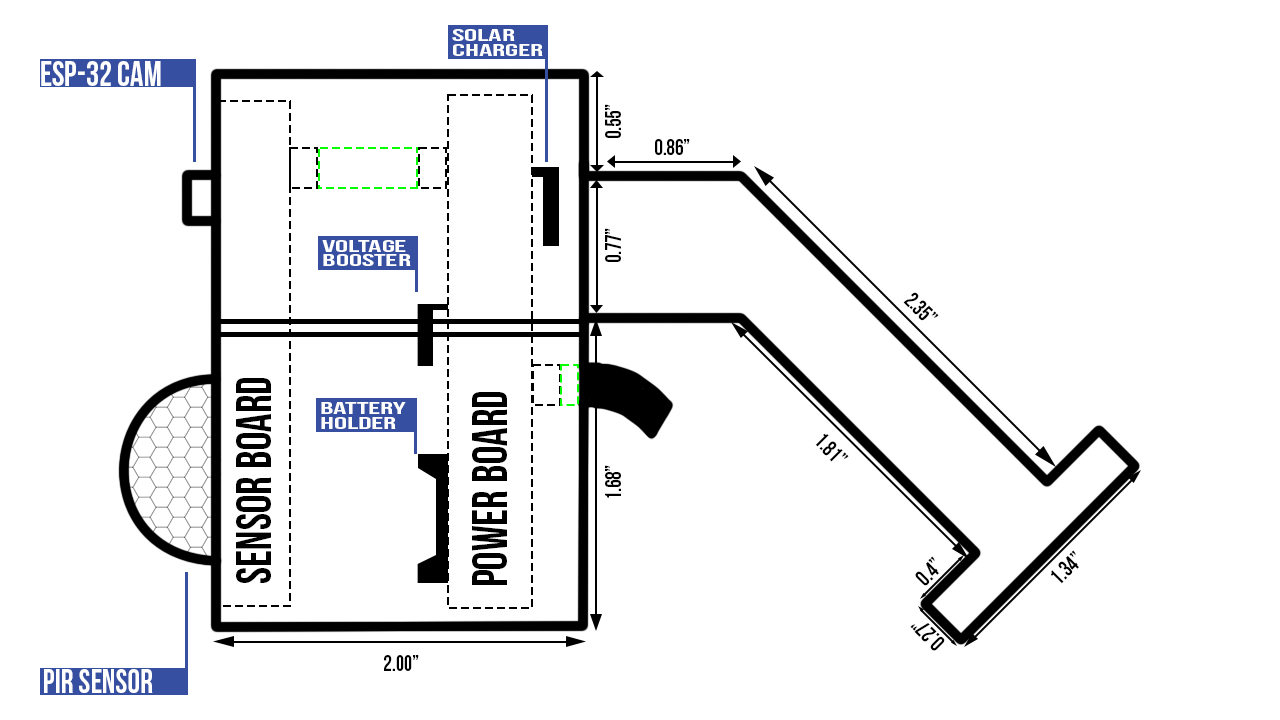
<style>
.page{position:relative;width:1280px;height:720px;background:#ffffff}
.page>*{position:absolute;margin:0}
.t1{font:17.3px/14.6px "BebasNeue";color:#ffffff;text-transform:uppercase;scale:1.9 1}
.t2{font:36px "BebasNeue";color:#ffffff;text-transform:uppercase;scale:0.93 1}
.t3{font:22.5px "BebasNeue";color:#000000;text-transform:uppercase;scale:0.93 1}
.t4{font:22.4px "BebasNeue";color:#000000;text-transform:uppercase;scale:0.94 1}
.t5{font:49.8px "BebasNeue";color:#000000;text-transform:uppercase;scale:0.93 1}
.t6{font:22.6px "BebasNeue";color:#000000;text-transform:uppercase;scale:0.93 1}
.t7{font:34.4px "BebasNeue";color:#ffffff;text-transform:uppercase;scale:0.93 1}
</style>
<div class="page">
<p class="t1" style="left:452px;top:29px;width:91px;height:27px">Solar<br>charger</p>
<p class="t2" style="left:41px;top:61px;width:120px;height:25px">esp-32 cam</p>
<p class="t3" style="left:605px;top:104px;width:16px;height:34px;rotate:-90deg">0.55”</p>
<p class="t4" style="left:655px;top:139px;width:35px;height:16px">0.86”</p>
<p class="t3" style="left:605px;top:228px;width:16px;height:34px;rotate:-90deg">0.77”</p>
<p class="t1" style="left:322px;top:240px;width:89px;height:26px">voltage<br>booster</p>
<p class="t3" style="left:903px;top:292px;width:36px;height:29px;rotate:45deg">2.35”</p>
<p class="t5" style="left:236px;top:378px;width:35px;height:205px;rotate:-90deg">Sensor board</p>
<p class="t5" style="left:472px;top:392px;width:35px;height:193px;rotate:-90deg">power board</p>
<p class="t1" style="left:321px;top:402px;width:85px;height:27px">battery<br>holder</p>
<p class="t3" style="left:815px;top:433px;width:34px;height:29px;rotate:45deg">1.81”</p>
<p class="t3" style="left:605px;top:465px;width:16px;height:33px;rotate:-90deg">1.68”</p>
<p class="t6" style="left:915px;top:556px;width:24px;height:30px;rotate:-45deg">0.4”</p>
<p class="t6" style="left:1050px;top:550px;width:29px;height:34px;rotate:-45deg">1.34”</p>
<p class="t6" style="left:910px;top:623px;width:35px;height:28px;rotate:-135deg">0.27”</p>
<p class="t6" style="left:384px;top:655px;width:35px;height:16px">2.00”</p>
<p class="t7" style="left:44px;top:669px;width:109px;height:24px">pir sensor</p>
</div>
